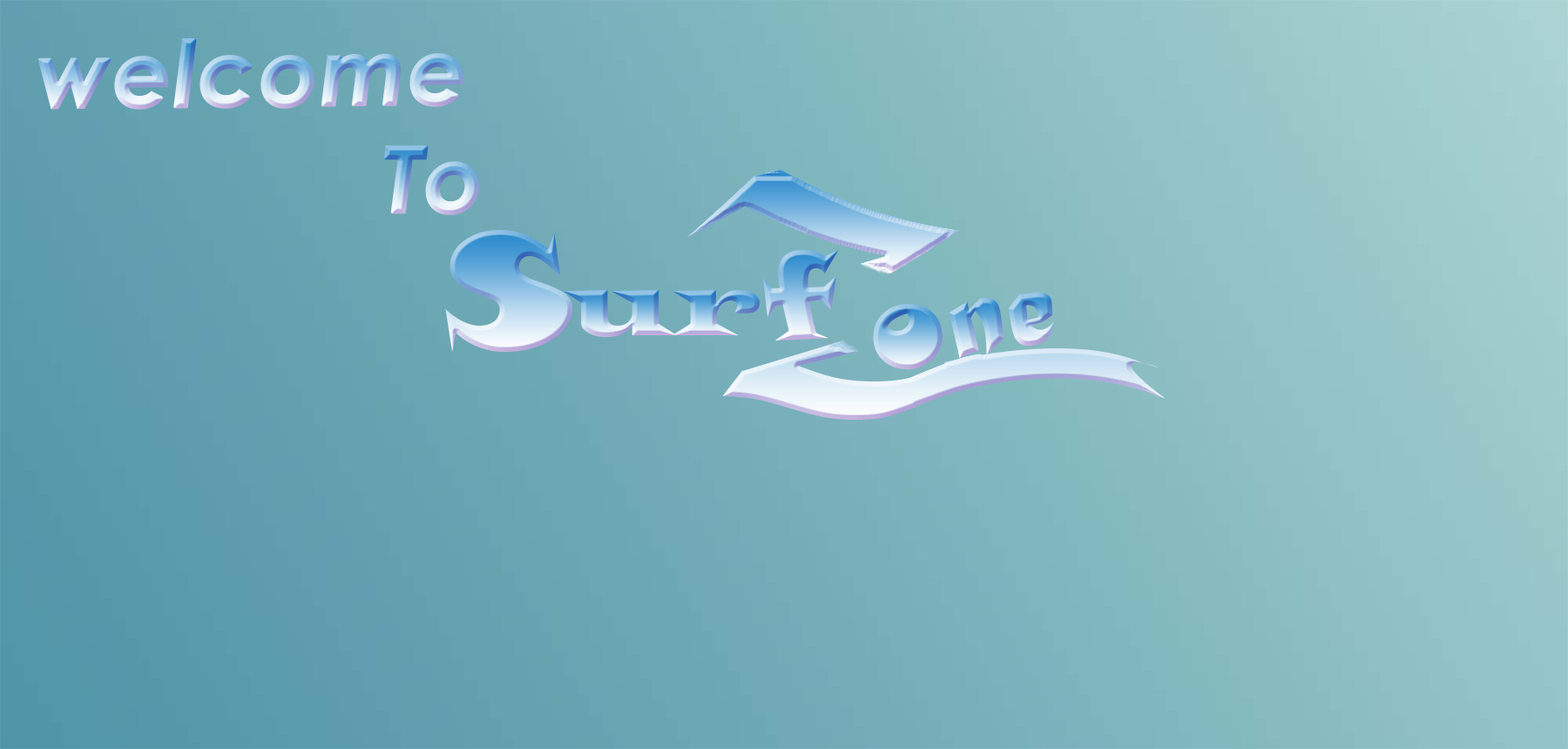
<style>
.page{position:relative;width:1568px;height:749px}
.page>*{position:absolute;margin:0}
.t1{font:156.8px "CenturyGothic-BoldItalic";font-weight:bold}
.t2{font:162.6px "SnapITC-Regular";text-transform:uppercase;font-style:italic}
.t3{font:209.1px "SnapITC-Regular"}
.t4{font:162.6px "LatinWide"}
.t5{font:209.1px "MaturaMTScriptCapitals"}
</style>
<div class="page">
<p class="t1" style="left:37px;top:38px;width:426px;height:72px">welcome</p>
<p class="t1" style="left:383px;top:145px;width:96px;height:70px">To</p>
<p class="t2" style="left:445px;top:230px;width:128px;height:122px">s</p>
<p class="t3" style="left:763px;top:250px;width:76px;height:91px">f</p>
<p class="t4" style="left:563px;top:290px;width:197px;height:47px">ur</p>
<p class="t5" style="left:1008px;top:292px;width:46px;height:54px;rotate:-11deg">e</p>
<p class="t3" style="left:873px;top:304px;width:70px;height:65px">o</p>
<p class="t5" style="left:949px;top:298px;width:55px;height:61px;rotate:-13deg">n</p>
</div>
